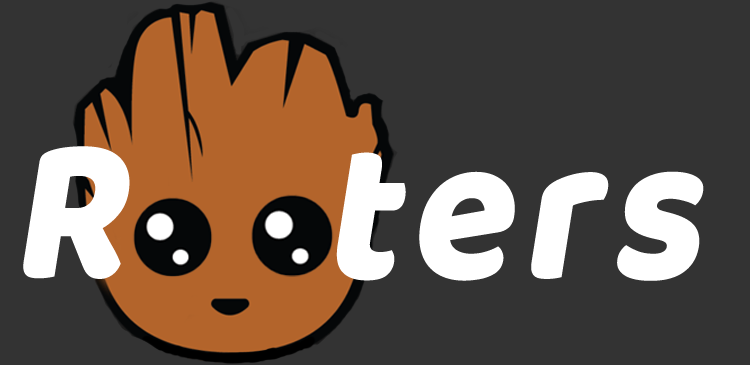
<style>
.page{position:relative;width:750px;height:365px;background:#333333}
.page>*{position:absolute;margin:0}
.t1{font:209.9px "BalooPaaji-Regular";letter-spacing:0.05em;color:#ffffff;font-style:italic;scale:0.9 1}
</style>
<div class="page">
<p class="t1" style="left:23px;top:146px;width:681px;height:135px">R    ters</p>
</div>
